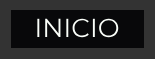
<style>
.page{position:relative;width:155px;height:59px;background:#08080a}
.page>*{position:absolute;margin:0}
.t1{font:26px "Montserrat-Regular";color:#fbfffa}
</style>
<div class="page">
<p class="t1" style="left:37px;top:18px;width:82px;height:20px">INICIO</p>
</div>
